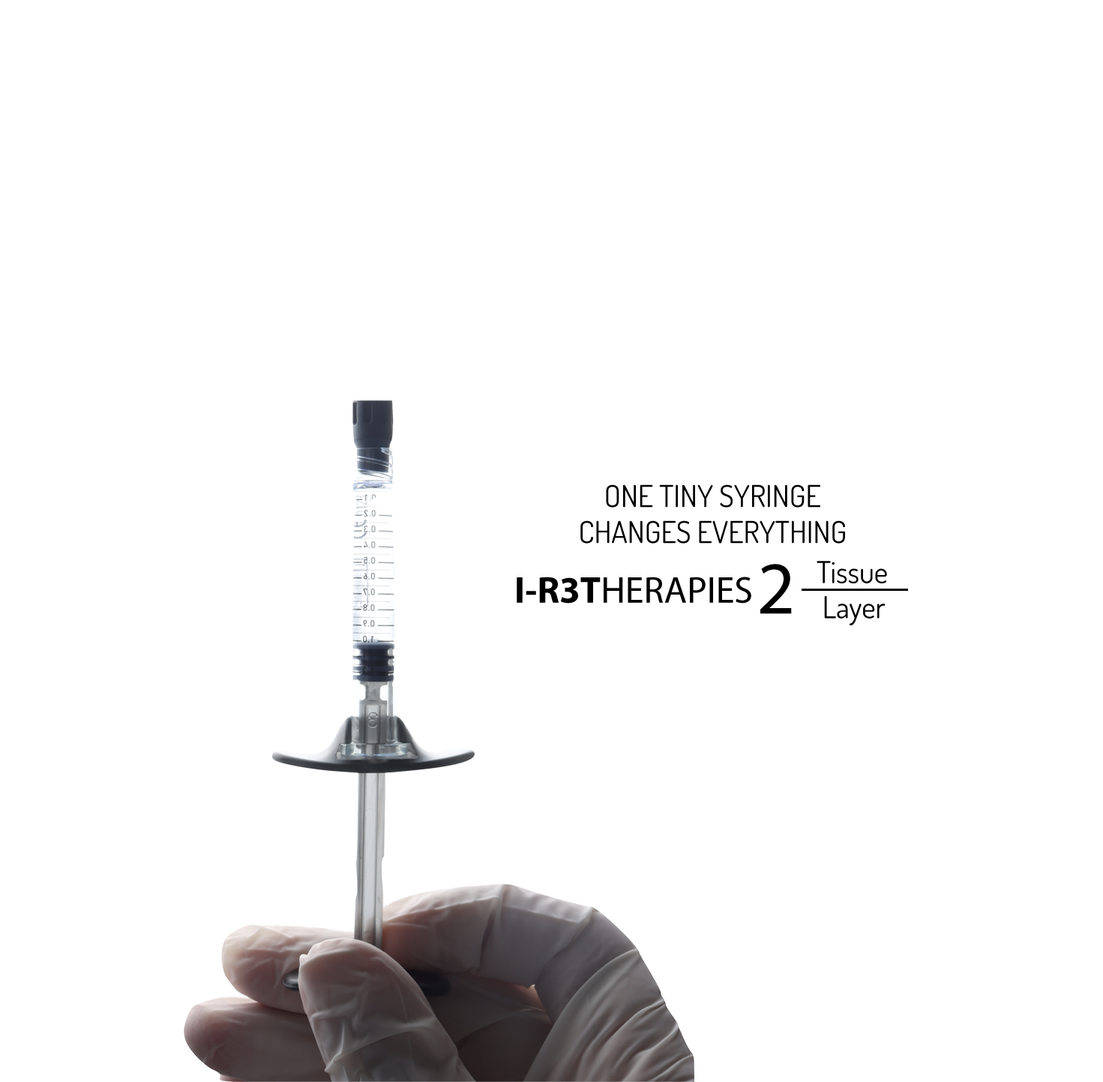
<style>
.page{position:relative;width:1103px;height:1082px;background:#ffffff}
.page>*{position:absolute;margin:0}
.t1{font:30px "Dosis-Regular";color:#000000}
.t2{font:75px "MyriadPro-Regular";color:#000000}
.t3{font:37.5px "MyriadPro-Regular";color:#000000}
.t4{font:37.5px "MyriadPro-Bold";color:#000000}
</style>
<div class="page">
<p class="t1" style="left:580px;top:484px;width:265px;height:59px;text-align:center">ONE TINY SYRINGE <br>CHANGES EVERYTHING</p>
<p class="t2" style="left:760px;top:564px;width:31px;height:50px">2</p>
<p class="t1" style="left:816px;top:561px;width:71px;height:22px">Tissue</p>
<p class="t3" style="left:516px;top:576px;width:235px;height:27px"><span class="t4">I-R3T</span>HERAPIES</p>
<p class="t1" style="left:824px;top:596px;width:61px;height:29px">Layer</p>
</div>
